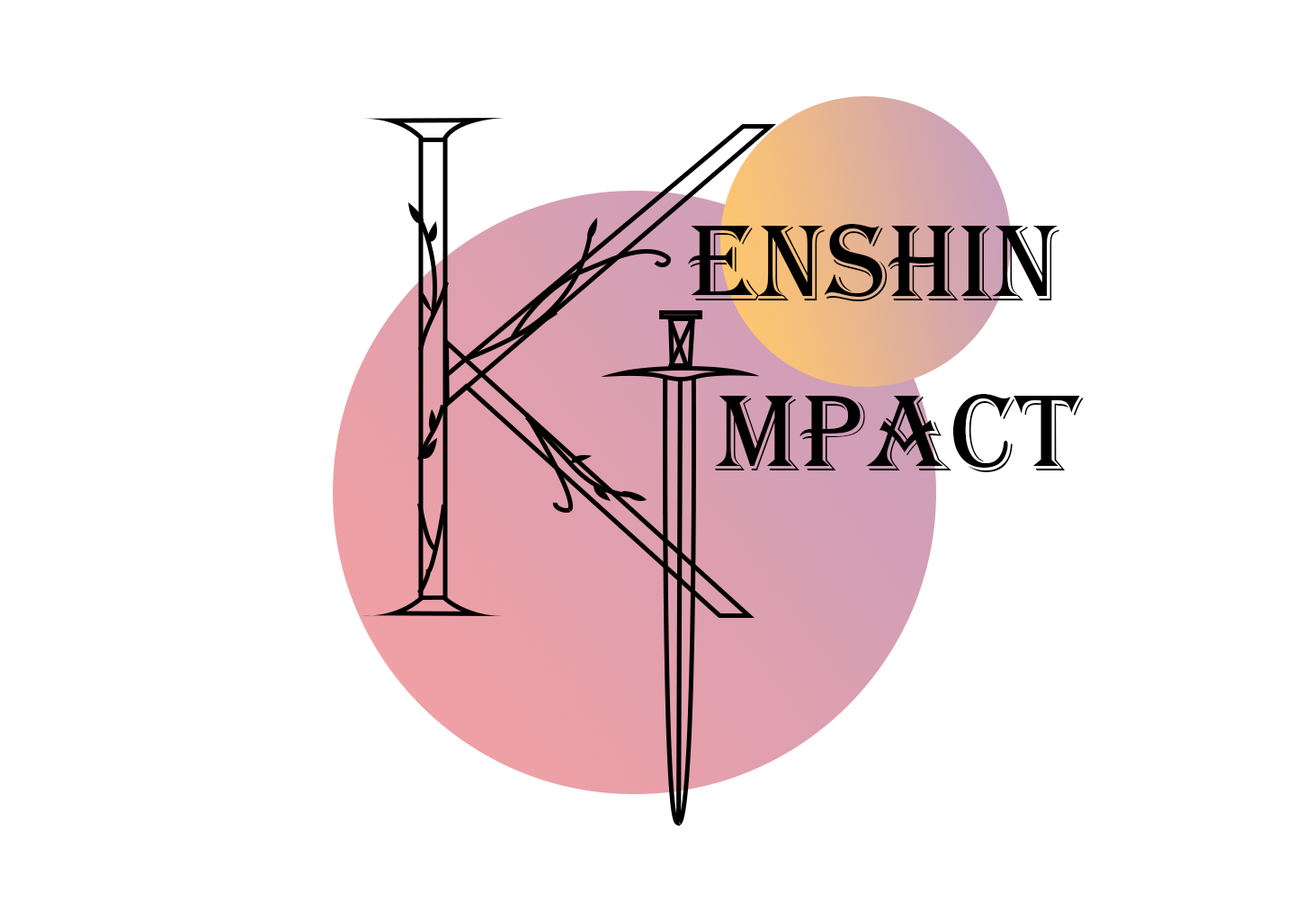
<style>
.page{position:relative;width:1295px;height:921px;background:#ffffff}
.page>*{position:absolute;margin:0}
.t1{font:112.4px "Algerian";color:#000000}
</style>
<div class="page">
<p class="t1" style="left:688px;top:224px;width:372px;height:77px">ENSHIN</p>
<p class="t1" style="left:714px;top:394px;width:370px;height:78px">MPACT</p>
</div>
